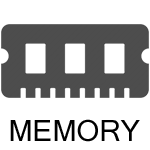
<style>
.page{position:relative;width:150px;height:150px;background:#ffffff}
.page>*{position:absolute;margin:0}
.t1{font:29.3px "MicrosoftSansSerif";color:#000000}
</style>
<div class="page">
<p class="t1" style="left:10px;top:119px;width:130px;height:23px">MEMORY</p>
</div>
